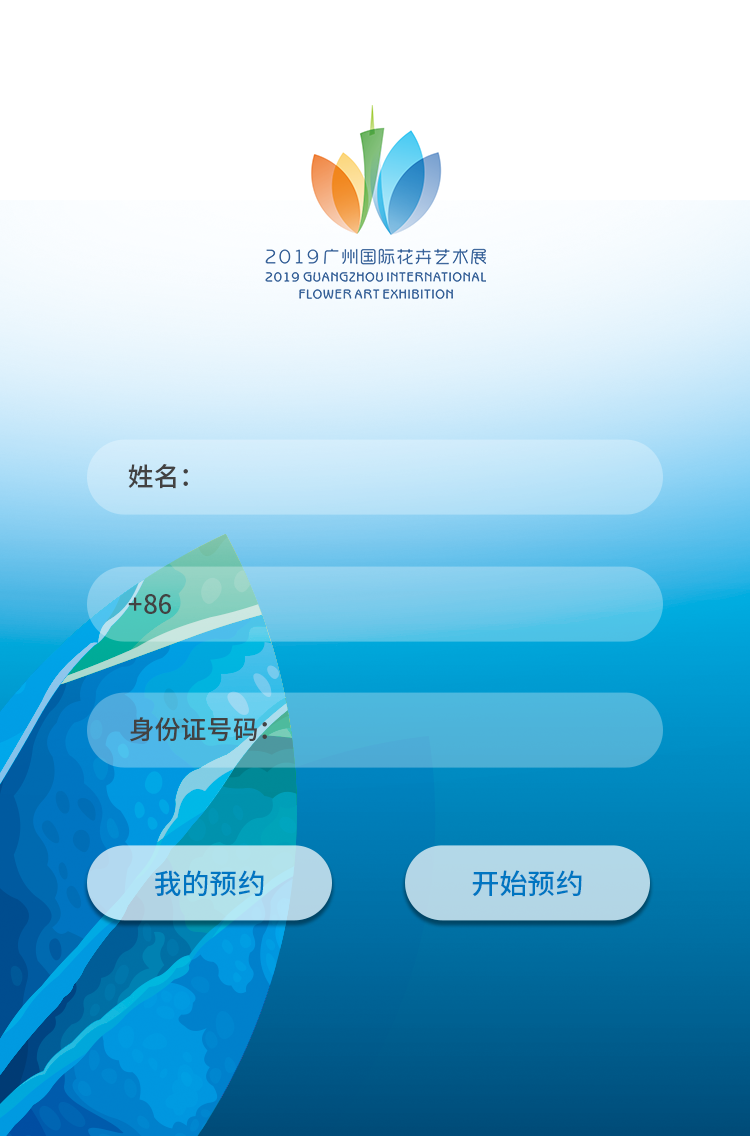
<style>
.page{position:relative;width:750px;height:1136px}
.page>*{position:absolute;margin:0}
.t1{font:26px "SourceHanSansCN-Medium";color:#434242}
.t2{font:28px "SourceHanSansCN-Medium";color:#0075c1}
</style>
<div class="page">
<p class="t1" style="left:128px;top:464px;width:60px;height:25px">姓名：</p>
<p class="t1" style="left:128px;top:594px;width:43px;height:20px">+86</p>
<p class="t1" style="left:130px;top:717px;width:137px;height:25px">身份证号码：</p>
<p class="t2" style="left:154px;top:870px;width:110px;height:26px">我的预约</p>
<p class="t2" style="left:472px;top:870px;width:110px;height:27px">开始预约</p>
</div>
